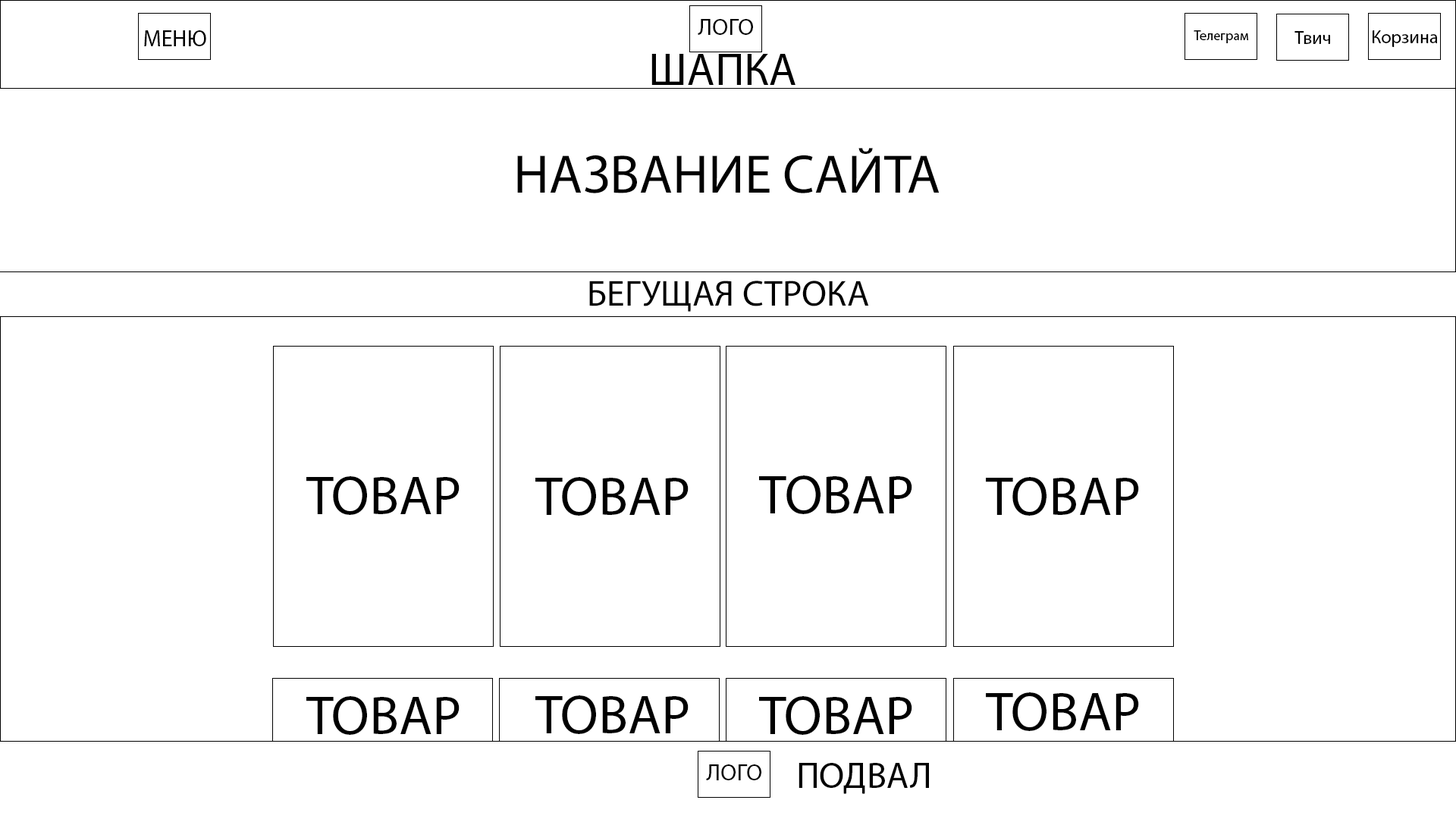
<style>
.page{position:relative;width:1456px;height:819px;background:#ffffff}
.page>*{position:absolute;margin:0}
.t1{font:23.6px "MyriadPro-Regular";color:#000000}
.t2{font:22.7px "MyriadPro-Regular";color:#000000}
.t3{font:13.6px "MyriadPro-Regular";color:#000000}
.t4{font:18.2px "MyriadPro-Regular";color:#000000}
.t5{font:45.5px "MyriadPro-Regular";color:#000000}
.t6{font:54.6px "MyriadPro-Regular";color:#000000}
.t7{font:36.4px "MyriadPro-Regular";color:#000000}
</style>
<div class="page">
<p class="t1" style="left:698px;top:19px;width:55px;height:16px">ЛОГО</p>
<p class="t2" style="left:144px;top:30px;width:62px;height:16px">МЕНЮ</p>
<p class="t3" style="left:1194px;top:30px;width:54px;height:13px">Телеграм</p>
<p class="t4" style="left:1294px;top:31px;width:36px;height:13px">Твич</p>
<p class="t4" style="left:1373px;top:30px;width:65px;height:17px">Корзина</p>
<p class="t5" style="left:651px;top:54px;width:144px;height:31px">ШАПКА</p>
<p class="t6" style="left:517px;top:148px;width:423px;height:45px">НАЗВАНИЕ САЙТА</p>
<p class="t7" style="left:589px;top:281px;width:280px;height:31px">БЕГУЩАЯ СТРОКА</p>
<p class="t6" style="left:306px;top:476px;width:154px;height:39px">ТОВАР</p>
<p class="t6" style="left:535px;top:477px;width:154px;height:39px">ТОВАР</p>
<p class="t6" style="left:759px;top:475px;width:153px;height:39px">ТОВАР</p>
<p class="t6" style="left:986px;top:477px;width:153px;height:39px">ТОВАР</p>
<p class="t6" style="left:306px;top:696px;width:154px;height:39px">ТОВАР</p>
<p class="t6" style="left:535px;top:695px;width:154px;height:39px">ТОВАР</p>
<p class="t6" style="left:759px;top:696px;width:153px;height:39px">ТОВАР</p>
<p class="t6" style="left:986px;top:692px;width:153px;height:39px">ТОВАР</p>
<p class="t1" style="left:706px;top:764px;width:55px;height:16px">ЛОГО</p>
<p class="t7" style="left:799px;top:763px;width:130px;height:31px"><span class="t3"><br></span>ПОДВАЛ</p>
</div>
